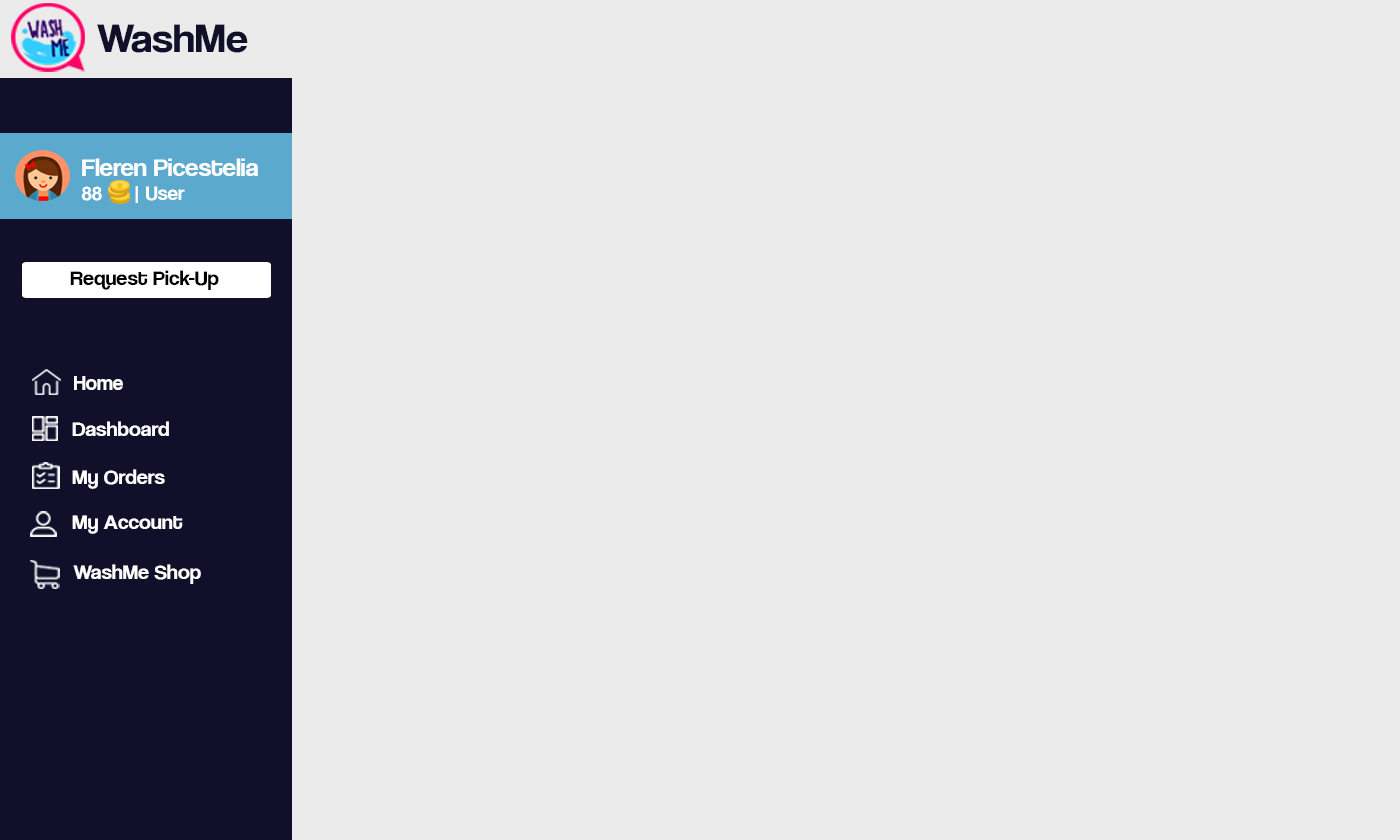
<style>
.page{position:relative;width:1400px;height:840px;background:#ebebeb}
.page>*{position:absolute;margin:0}
.t1{font:42.1px "CoolveticaRg-Regular";color:#120f2b;scale:1.05 1}
.t2{font:25.2px "CoolveticaRg-Regular";color:#ffffff;scale:1.05 1}
.t3{font:20px "CoolveticaRg-Regular";color:#ffffff;scale:1.05 1}
.t4{font:21px "CoolveticaRg-Regular";color:#000000;scale:1.05 1}
.t5{font:21px "CoolveticaRg-Regular";color:#ffffff}
.t6{font:21px "CoolveticaRg-Regular";color:#ffffff;scale:1.05 1}
</style>
<div class="page">
<p class="t1" style="left:97px;top:24px;width:151px;height:29px">WashMe</p>
<p class="t2" style="left:81px;top:158px;width:177px;height:45px">Fleren Picestelia<br><span class="t3">88      | User</span></p>
<p class="t4" style="left:70px;top:270px;width:149px;height:20px">Request Pick-Up</p>
<p class="t5" style="left:74px;top:376px;width:49px;height:14px">Home</p>
<p class="t6" style="left:72px;top:421px;width:97px;height:15px">Dashboard</p>
<p class="t6" style="left:72px;top:469px;width:93px;height:20px">My Orders</p>
<p class="t6" style="left:72px;top:515px;width:111px;height:19px">My Account</p>
<p class="t6" style="left:73px;top:564px;width:128px;height:20px">WashMe Shop</p>
</div>
